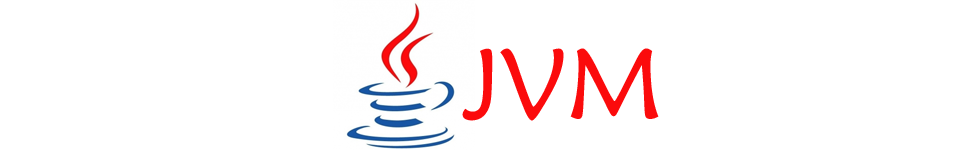
<style>
.page{position:relative;width:977px;height:150px;background:#ffffff}
.page>*{position:absolute;margin:0}
.t1{font:100px "STXinwei";color:#fb0b0c}
</style>
<div class="page">
<p class="t1" style="left:462px;top:48px;width:197px;height:73px">JVM</p>
</div>
